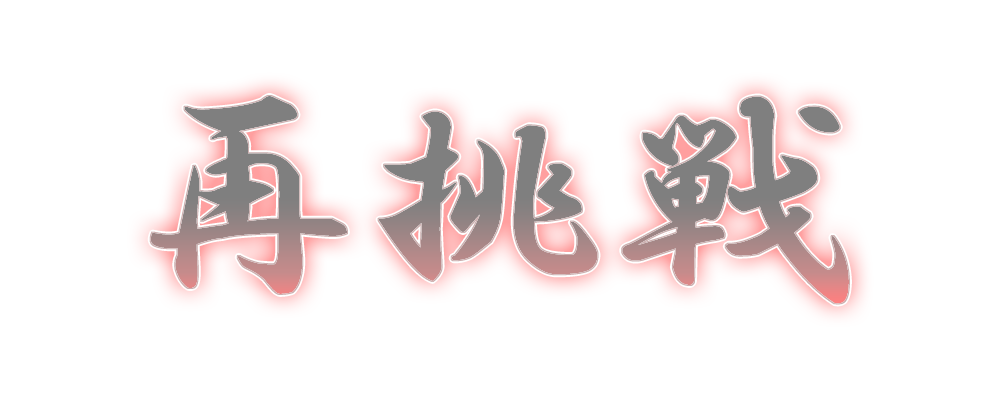
<style>
.page{position:relative;width:1000px;height:400px;background:#ffffff}
.page>*{position:absolute;margin:0}
.t1{font:238.9px "HGSGyoshotai";font-weight:bold}
</style>
<div class="page">
<p class="t1" style="left:150px;top:96px;width:699px;height:208px">再挑戦</p>
</div>
